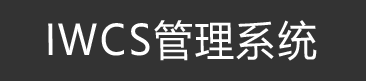
<style>
.page{position:relative;width:366px;height:81px;background:#333333}
.page>*{position:absolute;margin:0}
.t1{font:41.6px "MicrosoftYaHei";letter-spacing:0.06em;color:#ffffff;scale:0.94 1}
</style>
<div class="page">
<p class="t1" style="left:48px;top:20px;width:269px;height:41px">IWCS管理系统</p>
</div>
